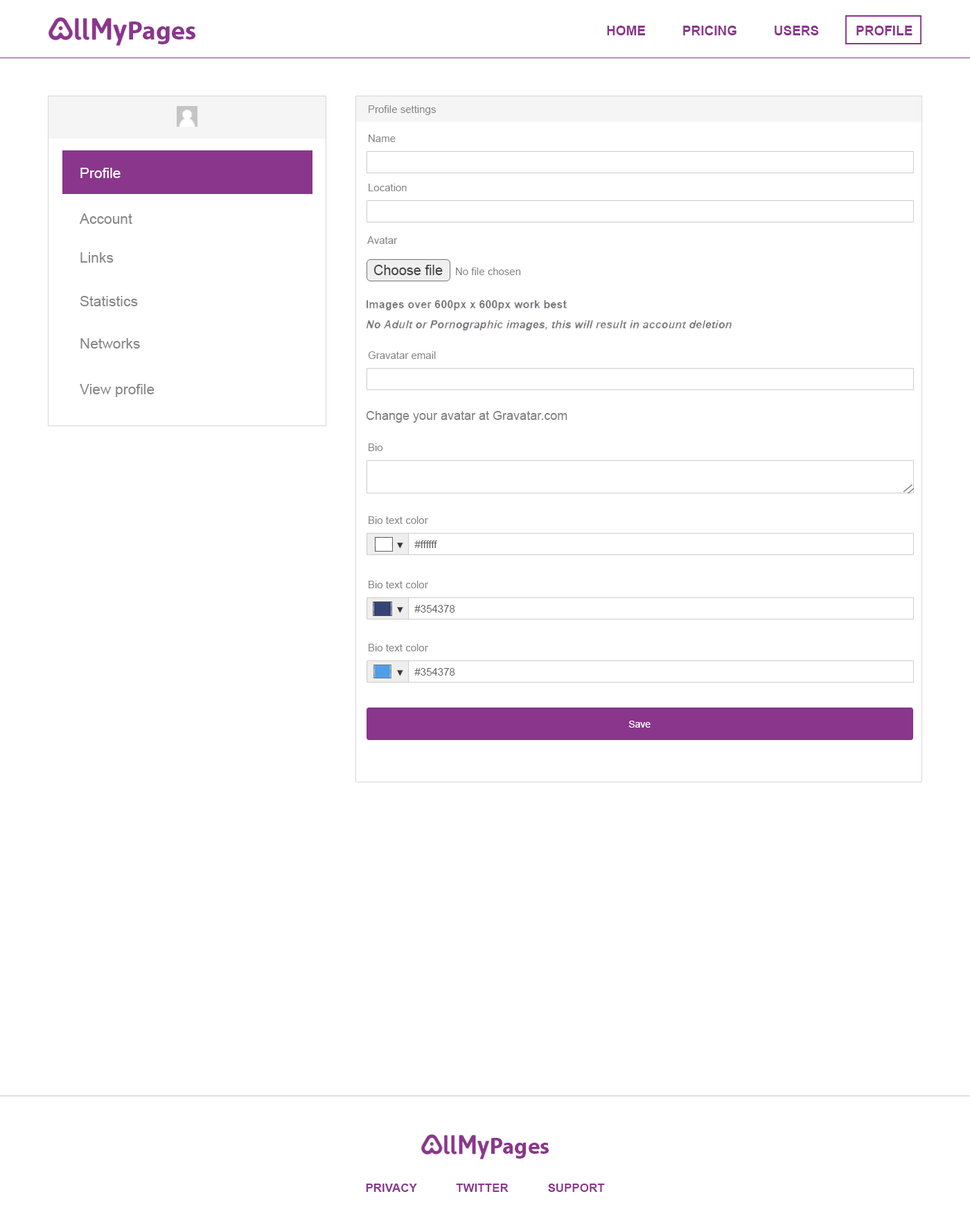
<style>
.page{position:relative;width:970px;height:1230px;background:#ffffff}
.page>*{position:absolute;margin:0}
.t1{font:26.2px "MyriadPro-Bold";color:#8a368c}
.t2{font:13.2px "Arial-BoldMT";color:#8a368c}
.t3{font:10.4px "ArialMT";color:#848484}
.t4{font:14.5px "ArialMT";color:#ffffff}
.t5{font:14.5px "ArialMT";color:#878787}
.t6{font:13.9px "ArialMT";color:#414141}
.t7{font:12.5px "ArialMT";color:#848484}
.t8{font:10.4px "ArialMT";color:#605f5f}
.t9{font:9.6px "ArialMT";color:#ffffff}
.t10{font:23px "MyriadPro-Bold";color:#8a368c}
.t11{font:11.8px "Arial-BoldMT";color:#8a368c}
</style>
<div class="page">
<p class="t1" style="left:129px;top:21px;width:66px;height:23px">Pages</p>
<p class="t2" style="left:607px;top:26px;width:305px;height:9px">HOME          PRICING          USERS          PROFILE</p>
<p class="t3" style="left:369px;top:105px;width:67px;height:10px">Profile settings</p>
<p class="t3" style="left:369px;top:134px;width:27px;height:8px">Name</p>
<p class="t4" style="left:80px;top:168px;width:41px;height:10px">Profile</p>
<p class="t3" style="left:369px;top:184px;width:38px;height:7px">Location</p>
<p class="t5" style="left:80px;top:213px;width:52px;height:11px">Account</p>
<p class="t3" style="left:367px;top:236px;width:31px;height:8px">Avatar</p>
<p class="t5" style="left:80px;top:252px;width:34px;height:11px">Links</p>
<p class="t6" style="left:373px;top:265px;width:70px;height:10px">Choose file</p>
<p class="t3" style="left:456px;top:267px;width:65px;height:8px">No file chosen</p>
<p class="t5" style="left:80px;top:296px;width:58px;height:10px">Statistics</p>
<p class="t5" style="left:80px;top:338px;width:60px;height:10px">Networks</p>
<p class="t3" style="left:368px;top:351px;width:68px;height:8px">Gravatar email</p>
<p class="t5" style="left:80px;top:384px;width:74px;height:13px">View profile</p>
<p class="t7" style="left:366px;top:411px;width:201px;height:12px">Change your avatar at Gravatar.com</p>
<p class="t3" style="left:369px;top:443px;width:14px;height:8px">Bio</p>
<p class="t3" style="left:369px;top:516px;width:59px;height:8px">Bio text color</p>
<p class="t8" style="left:414px;top:540px;width:23px;height:8px">#ffffff</p>
<p class="t3" style="left:369px;top:580px;width:59px;height:8px">Bio text color</p>
<p class="t8" style="left:414px;top:605px;width:41px;height:7px">#354378</p>
<p class="t3" style="left:369px;top:644px;width:59px;height:7px">Bio text color</p>
<p class="t8" style="left:414px;top:668px;width:41px;height:7px">#354378</p>
<p class="t9" style="left:628px;top:720px;width:22px;height:7px">Save</p>
<p class="t10" style="left:491px;top:1137px;width:58px;height:21px">Pages</p>
<p class="t11" style="left:366px;top:1183px;width:239px;height:8px">PRIVACY            TWITTER            SUPPORT</p>
</div>
